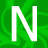
<style>
.page{position:relative;width:48px;height:48px;background:#009a04}
.page>*{position:absolute;margin:0}
.t1{font:48px "Tahoma";color:#ffffff}
</style>
<div class="page">
<p class="t1" style="left:11px;top:6px;width:26px;height:36px">N</p>
</div>
